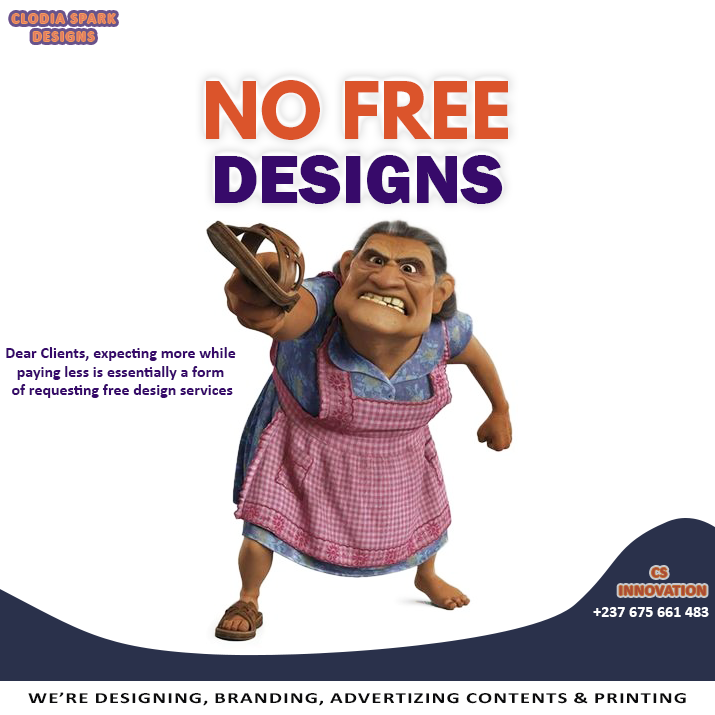
<style>
.page{position:relative;width:715px;height:715px;background:#ffffff}
.page>*{position:absolute;margin:0}
.t1{font:14.3px "Calibri-Bold";letter-spacing:0.08em;color:#e17a61;text-transform:uppercase}
.t2{font:70px "LeagueSpartan-Bold";color:#db542b}
.t3{font:70px/64.2px "FranklinGothic-Heavy";letter-spacing:0.002em;color:#370a6a}
.t4{font:15.6px "Calibri-Bold";letter-spacing:0.012em;color:#370a6a}
.t5{font:14.7px "Calibri-Bold";letter-spacing:0.02em;color:#ab4937;text-transform:uppercase}
.t6{font:15.6px "Calibri-Bold";letter-spacing:0.012em;color:#ffffff;text-transform:uppercase}
.t7{font:15.6px "Calibri-Bold";letter-spacing:0.012em;color:#0c0c0d;text-transform:uppercase;scale:1.35 1}
</style>
<div class="page">
<p class="t1" style="left:12px;top:14px;width:103px;height:27px;text-align:center">CLODIA SPARK<br>DESIGNS</p>
<p class="t2" style="left:206px;top:80px;width:302px;height:124px;text-align:center">NO FREE<br><span class="t3">DESIGNS</span></p>
<p class="t4" style="left:6px;top:347px;width:230px;height:51px;text-align:center">Dear Clients, expecting more while <br>paying less is essentially a form <br>of requesting free design services</p>
<p class="t5" style="left:619px;top:568px;width:87px;height:27px;text-align:center">CS  <br>INNOVATION</p>
<p class="t6" style="left:593px;top:607px;width:116px;height:10px">+237 675 661 483</p>
<p class="t7" style="left:28px;top:692px;width:658px;height:14px">We’re Designing, Branding, Advertizing Contents &amp; PrintING</p>
</div>
